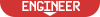
<style>
.page{position:relative;width:100px;height:17px;background:#d23434}
.page>*{position:absolute;margin:0}
.t1{font:15px "GlassGauge";color:#ffffff}
</style>
<div class="page">
<p class="t1" style="left:22px;top:1px;width:58px;height:10px">ENGINEER</p>
</div>
